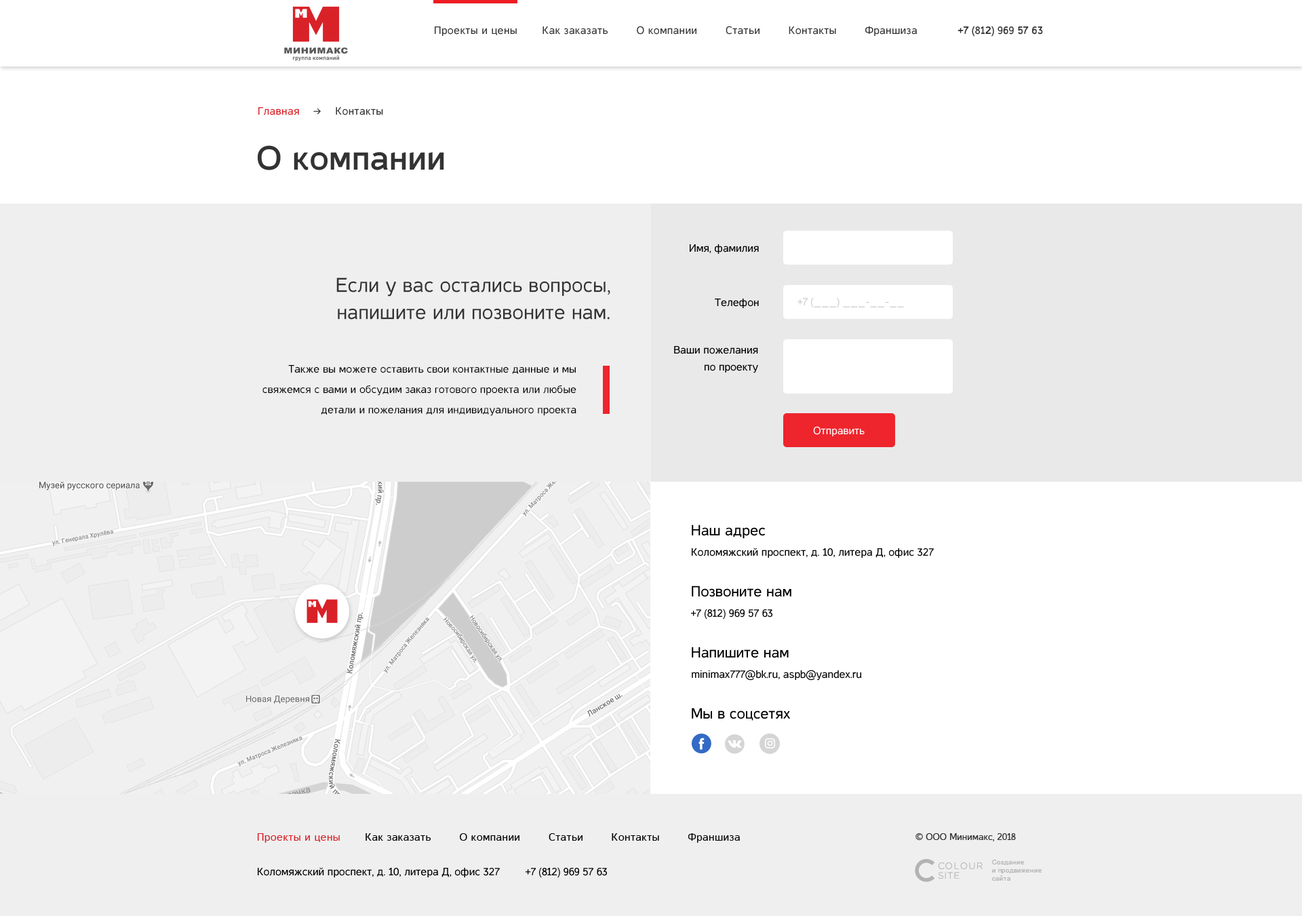
<style>
.page{position:relative;width:1302px;height:916px;background:#ffffff}
.page>*{position:absolute;margin:0}
.t1{font:10.9px "Casper";letter-spacing:0.025em;color:#333333}
.t2{font:10.9px "Casper";letter-spacing:0.025em;color:#d92128}
.t3{font:33.9px "CasperBold";color:#333333}
.t4{font:10.9px "Casper";color:#000000}
.t5{font:20.3px/27.1px "Casper";color:#333333}
.t6{font:10.9px "Casper";color:#cccccc}
.t7{font:10.9px/17px "Casper";color:#000000}
.t8{font:10.9px/20.3px "Casper";color:#000000}
.t9{font:10.9px "Casper";color:#ffffff}
.t10{font:14.9px "Casper";color:#000000}
.t11{font:14.9px/40.7px "Casper";color:#000000}
</style>
<div class="page">
<p class="t1" style="left:258px;top:107px;width:125px;height:8px"><span class="t2">Главная</span>    →    Контакты</p>
<p class="t3" style="left:258px;top:145px;width:186px;height:25px">О компании</p>
<p class="t4" style="left:690px;top:243px;width:69px;height:11px">Имя, фамилия</p>
<p class="t5" style="left:336px;top:277px;width:274px;height:42px;text-align:right">Если у вас остались вопросы,<br>напишите или позвоните нам.</p>
<p class="t4" style="left:715px;top:298px;width:44px;height:10px">Телефон</p>
<p class="t6" style="left:798px;top:297px;width:106px;height:11px">+7 (___) ___-__-__</p>
<p class="t7" style="left:674px;top:346px;width:84px;height:27px;text-align:right">Ваши пожелания<br>по проекту</p>
<p class="t8" style="left:262px;top:365px;width:315px;height:51px;text-align:right">Также вы можете оставить свои контактные данные и мы свяжемся с вами и обсудим заказ готового проекта или любые детали и пожелания для индивидуального проекта</p>
<p class="t9" style="left:813px;top:426px;width:52px;height:10px">Отправить</p>
<p class="t8" style="left:691px;top:524px;width:243px;height:196px"><span class="t10">Наш адрес<br></span>Коломяжский проспект, д. 10, литера Д, офис 327<br><span class="t11">Позвоните нам<br></span>+7 (812) 969 57 63<br><span class="t11">Напишите нам<br></span>minimax777@bk.ru, aspb@yandex.ru<br><span class="t11">Мы в соцсетях</span></p>
</div>
